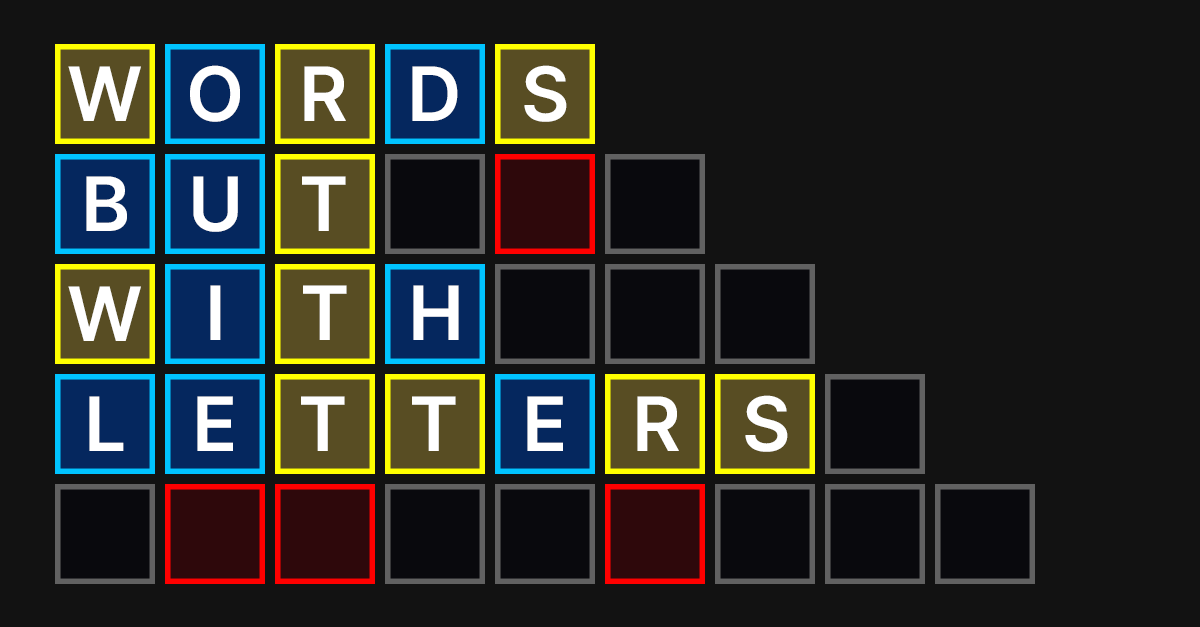
<style>
.page{position:relative;width:1200px;height:627px;background:#121212}
.page>*{position:absolute;margin:0}
.t1{font:75px "Inter-SemiBold";color:#ffffff}
</style>
<div class="page">
<p class="t1" style="left:190px;top:65px;width:50px;height:57px">O</p>
<p class="t1" style="left:524px;top:65px;width:43px;height:57px">S</p>
<p class="t1" style="left:68px;top:66px;width:73px;height:55px">W</p>
<p class="t1" style="left:304px;top:66px;width:42px;height:55px">R</p>
<p class="t1" style="left:412px;top:66px;width:46px;height:55px">D</p>
<p class="t1" style="left:86px;top:176px;width:41px;height:55px">B</p>
<p class="t1" style="left:193px;top:176px;width:45px;height:56px">U</p>
<p class="t1" style="left:302px;top:176px;width:44px;height:55px">T</p>
<p class="t1" style="left:68px;top:286px;width:73px;height:55px">W</p>
<p class="t1" style="left:210px;top:285px;width:11px;height:55px">I</p>
<p class="t1" style="left:303px;top:285px;width:44px;height:55px">T</p>
<p class="t1" style="left:413px;top:285px;width:46px;height:55px">H</p>
<p class="t1" style="left:89px;top:396px;width:35px;height:55px">L</p>
<p class="t1" style="left:197px;top:396px;width:36px;height:55px">E</p>
<p class="t1" style="left:301px;top:396px;width:44px;height:55px">T</p>
<p class="t1" style="left:412px;top:396px;width:44px;height:55px">T</p>
<p class="t1" style="left:527px;top:396px;width:36px;height:55px">E</p>
<p class="t1" style="left:637px;top:396px;width:42px;height:55px">R</p>
<p class="t1" style="left:745px;top:395px;width:43px;height:57px">S</p>
</div>
